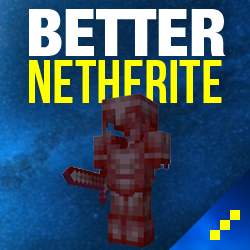
<style>
.page{position:relative;width:250px;height:250px}
.page>*{position:absolute;margin:0}
.t1{font:65.3px "HelveticaNeue-BlackCond";color:#ffffff;text-transform:uppercase}
.t2{font:60.1px "BebasNeueBold";color:#ffff00;text-transform:uppercase}
</style>
<div class="page">
<p class="t1" style="left:29px;top:9px;width:197px;height:47px">better</p>
<p class="t2" style="left:29px;top:60px;width:193px;height:43px">netherite</p>
</div>
